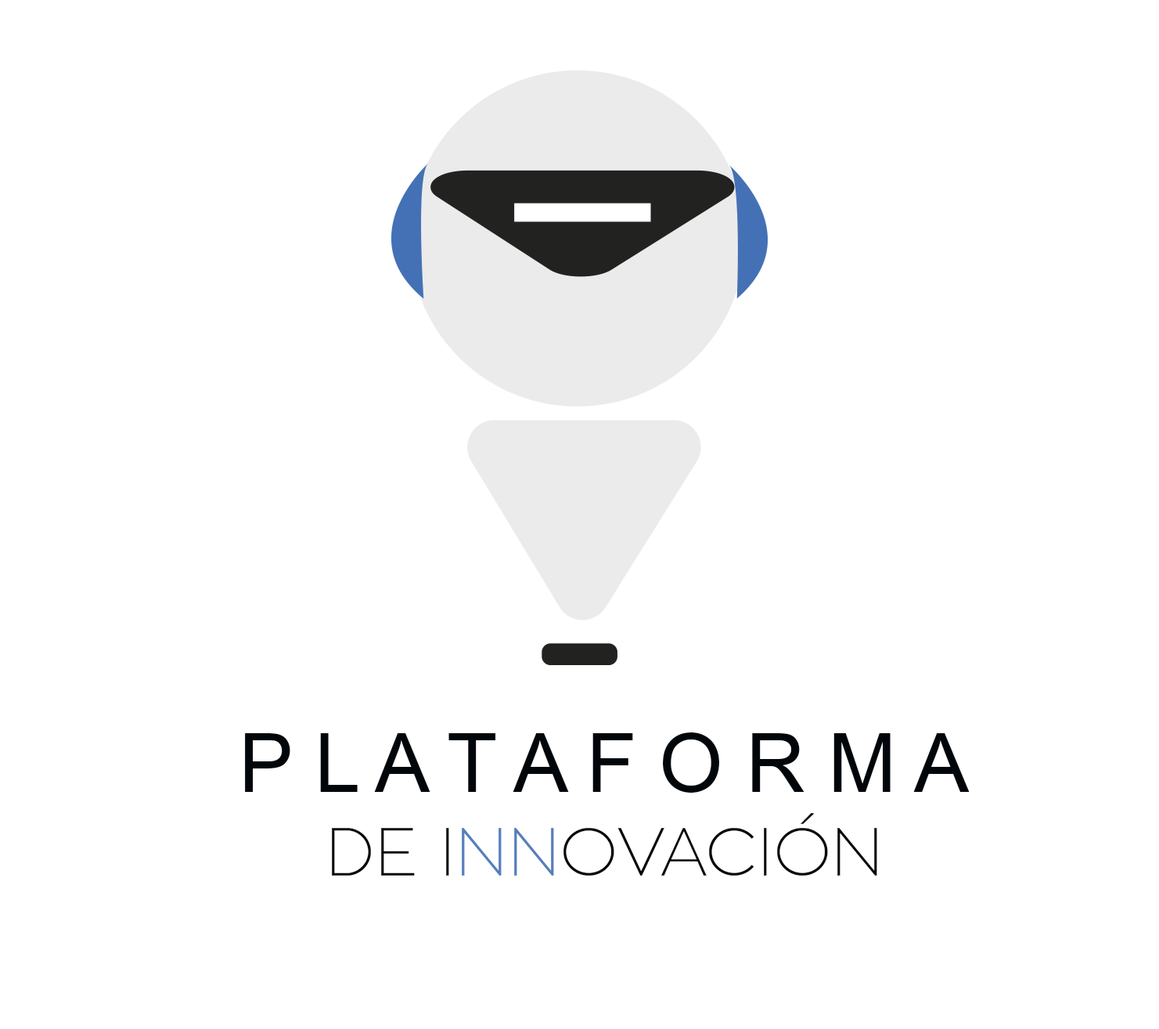
<style>
.page{position:relative;width:1159px;height:1029px;background:#ffffff}
.page>*{position:absolute;margin:0}
.t1{font:82px "ArialMT";color:#01060b}
.t2{font:68px "ZonaPro-Thin";color:#01060b}
.t3{font:68px "ZonaPro-Thin";color:#557ebc}
</style>
<div class="page">
<p class="t1" style="left:245px;top:732px;width:725px;height:61px">P L A T A F O R M A</p>
<p class="t2" style="left:332px;top:813px;width:545px;height:63px">DE I<span class="t3">NN</span>OVACIÓN</p>
</div>
